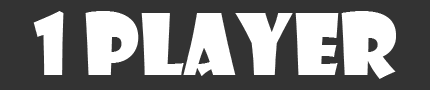
<style>
.page{position:relative;width:430px;height:90px;background:#333333}
.page>*{position:absolute;margin:0}
.t1{font:83.3px "ShowcardGothic-Reg";color:#ffffff}
</style>
<div class="page">
<p class="t1" style="left:33px;top:11px;width:363px;height:68px">1 player</p>
</div>
